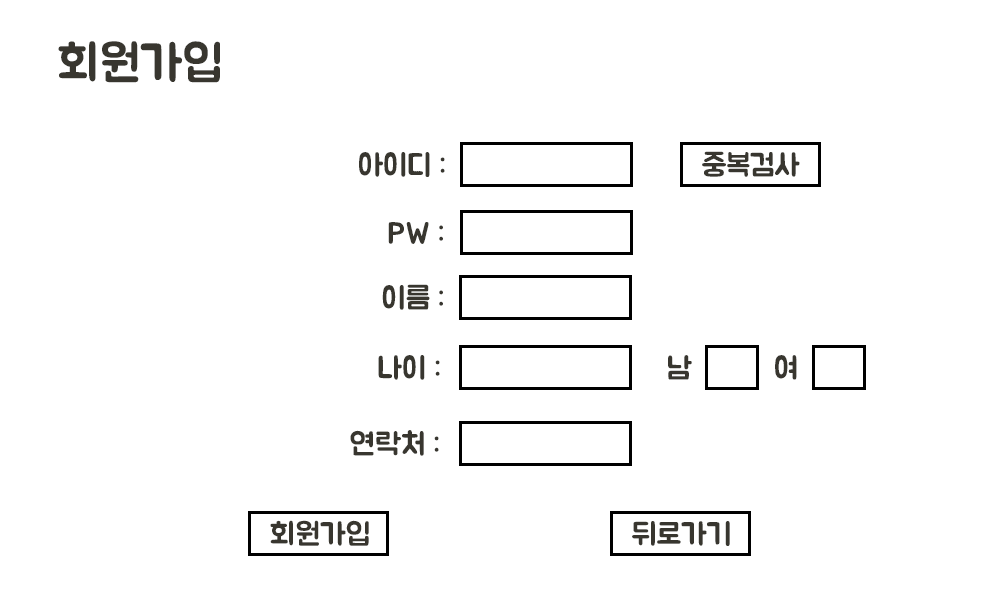
<style>
.page{position:relative;width:1000px;height:600px;background:#ffffff}
.page>*{position:absolute;margin:0}
.t1{font:50px "BMJUA";color:#38362f}
.t2{font:30.6px "BMJUA";color:#38362f}
</style>
<div class="page">
<p class="t1" style="left:58px;top:41px;width:162px;height:42px">회원가입</p>
<p class="t2" style="left:359px;top:152px;width:86px;height:25px">아이디 :</p>
<p class="t2" style="left:702px;top:151px;width:98px;height:26px">중복검사</p>
<p class="t2" style="left:388px;top:222px;width:55px;height:22px">PW :</p>
<p class="t2" style="left:382px;top:284px;width:61px;height:26px">이름 :</p>
<p class="t2" style="left:378px;top:355px;width:62px;height:25px">나이 :</p>
<p class="t2" style="left:668px;top:355px;width:24px;height:25px">남</p>
<p class="t2" style="left:775px;top:355px;width:22px;height:25px">여</p>
<p class="t2" style="left:350px;top:430px;width:89px;height:26px">연락처 :</p>
<p class="t2" style="left:270px;top:520px;width:99px;height:26px">회원가입</p>
<p class="t2" style="left:632px;top:521px;width:98px;height:25px">뒤로가기</p>
</div>
